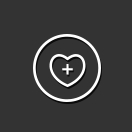
<style>
.page{position:relative;width:132px;height:132px;background:#333333}
.page>*{position:absolute;margin:0}
.t1{font:24px "MontserratAlternates-Medium";color:#ffffff}
</style>
<div class="page">
<p class="t1" style="left:62px;top:64px;width:11px;height:11px">+</p>
</div>
